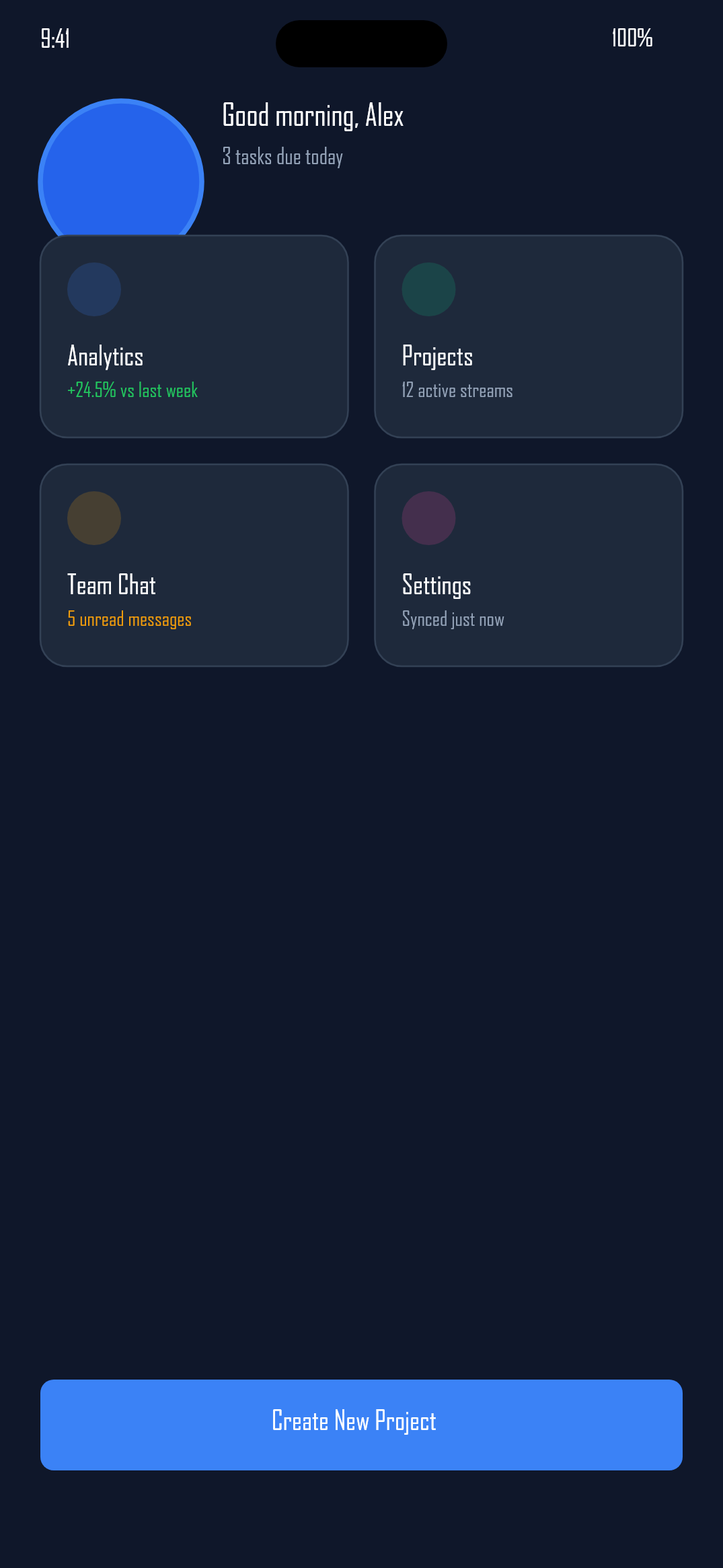
<style>
.page{position:relative;width:723px;height:1568px;background:#0f172a}
.page>*{position:absolute;margin:0}
.t1{font:25.2px "Arial-BoldMT";color:#ffffff}
.t2{font:23.6px "ArialMT";color:#ffffff}
.t3{font:30.3px "Arial-BoldMT";color:#ffffff}
.t4{font:21.9px "ArialMT";color:#94a3b8}
.t5{font:26.9px "Arial-BoldMT";color:#ffffff}
.t6{font:20.2px "ArialMT";color:#22c55e}
.t7{font:20.2px "ArialMT";color:#94a3b8}
.t8{font:20.2px "ArialMT";color:#f59e0b}
</style>
<div class="page">
<p class="t1" style="left:40px;top:27px;width:36px;height:32px">9:41</p>
<p class="t2" style="left:612px;top:27px;width:43px;height:30px">100%</p>
<p class="t3" style="left:222px;top:101px;width:199px;height:39px">Good morning, Alex</p>
<p class="t4" style="left:222px;top:147px;width:123px;height:27px">3 tasks due today</p>
<p class="t5" style="left:67px;top:343px;width:84px;height:34px">Analytics</p>
<p class="t5" style="left:402px;top:343px;width:80px;height:34px">Projects</p>
<p class="t6" style="left:67px;top:380px;width:132px;height:26px">+24.5% vs last week</p>
<p class="t7" style="left:402px;top:380px;width:113px;height:26px">12 active streams</p>
<p class="t5" style="left:67px;top:572px;width:98px;height:34px">Team Chat</p>
<p class="t5" style="left:402px;top:572px;width:76px;height:34px">Settings</p>
<p class="t8" style="left:67px;top:609px;width:127px;height:26px">5 unread messages</p>
<p class="t7" style="left:402px;top:609px;width:105px;height:26px">Synced just now</p>
<p class="t5" style="left:272px;top:1409px;width:180px;height:33px">Create New Project</p>
</div>
